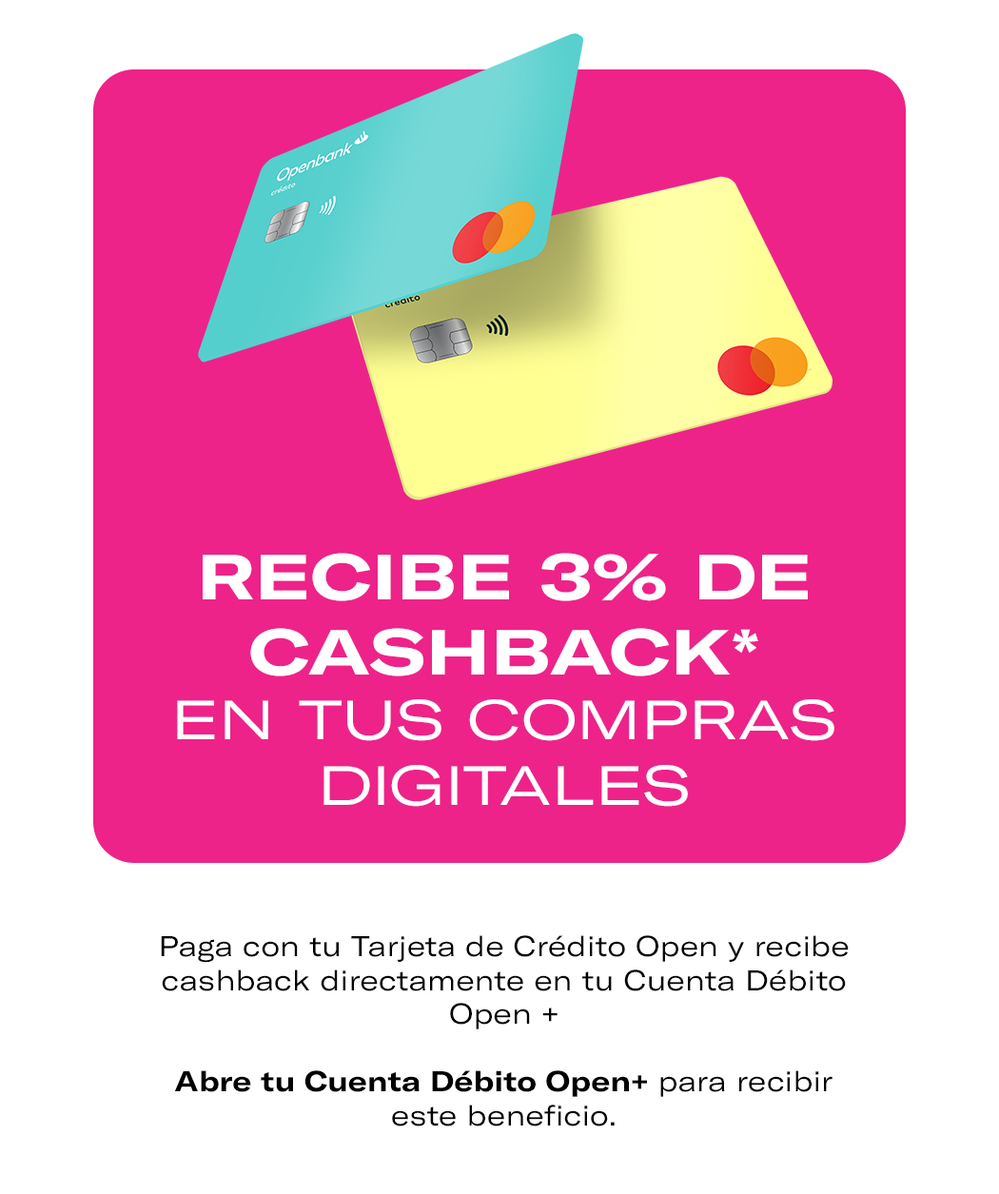
<style>
.page{position:relative;width:999px;height:1194px;background:#ffffff}
.page>*{position:absolute;margin:0}
.t1{font:54.2px "GTAmerica-ExpandedRegular";letter-spacing:0.01em;color:#ffffff;text-transform:uppercase}
.t2{font:62.8px "GTAmerica-ExpandedBold";letter-spacing:0.01em;color:#ffffff;text-transform:uppercase}
.t3{font:28.2px "GTAmerica-ExtendedRegular";letter-spacing:0.01em;color:#000000}
.t4{font:28.2px "GTAmerica-ExtendedBold";letter-spacing:0.01em;color:#000000}
</style>
<div class="page">
<p class="t1" style="left:177px;top:553px;width:657px;height:254px;text-align:center"><span class="t2">Recibe 3% de cashback*</span><br>en tus compras<br>digitales</p>
<p class="t3" style="left:161px;top:935px;width:688px;height:191px;text-align:center">Paga con tu Tarjeta de Crédito Open y recibe cashback directamente en tu Cuenta Débito Open +<br><br><span class="t4">Abre tu Cuenta Débito Open+ </span>para recibir este beneficio.</p>
</div>
